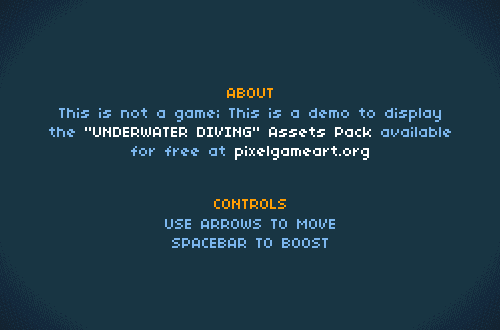
<style>
.page{position:relative;width:500px;height:330px;background:#183543}
.page>*{position:absolute;margin:0}
.t1{font:16.2px "04b03";color:#7cb6ed}
.t2{font:16.2px "04b03";color:#ff9e05}
.t3{font:16.2px "04b03";color:#ffffff}
</style>
<div class="page">
<p class="t1" style="left:49px;top:88px;width:402px;height:72px;text-align:center"><span class="t2">ABOUT<br></span>This is not a game; This is a demo to display<br>the <span class="t3">"UNDERWATER DIVING" Assets Pack</span> available<br>for free at <span class="t3">pixelgameart.org</span></p>
<p class="t1" style="left:165px;top:199px;width:170px;height:49px;text-align:center"><span class="t2">CONTROLS<br></span>USE ARROWS TO MOVE<br>SPACEBAR TO BOOST</p>
</div>
